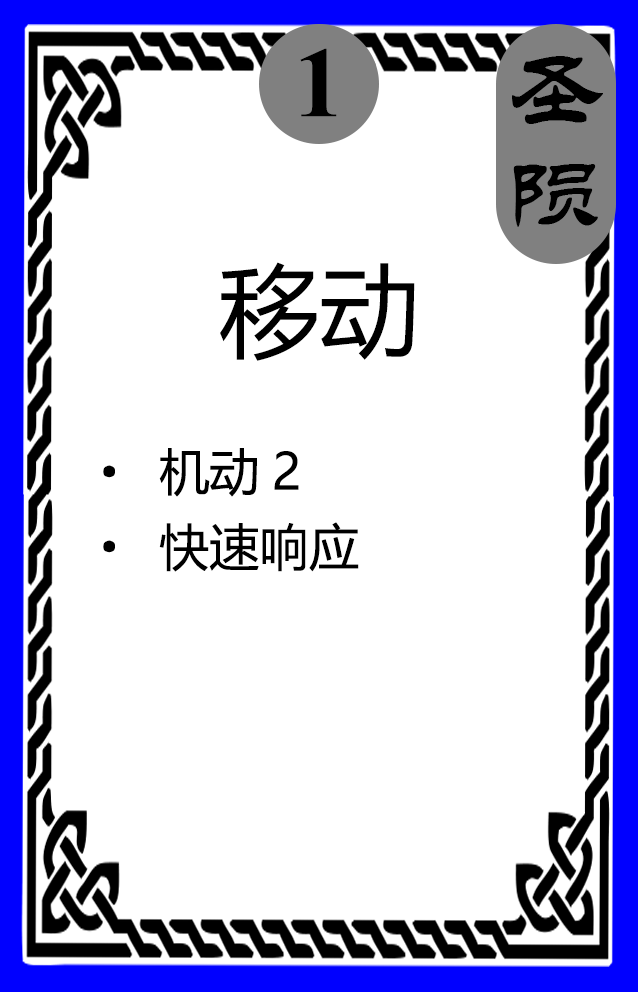
<style>
.page{position:relative;width:638px;height:992px;background:#ffffff}
.page>*{position:absolute;margin:0}
.t1{font:100px "TimesNewRomanPS-BoldMT";color:#000000}
.t2{font:100px/200px "STLiti";color:#000000}
.t3{font:100px "MicrosoftYaHei";color:#000000}
.t4{font:50px/75px "MicrosoftYaHei";color:#000000}
.t5{font:50px/75px "SimSun";color:#000000}
</style>
<div class="page">
<p class="t1" style="left:300px;top:48px;width:37px;height:69px">1</p>
<p class="t2" style="left:512px;top:56px;width:91px;height:171px;text-align:center">圣陨</p>
<p class="t3" style="left:220px;top:262px;width:195px;height:99px">移动</p>
<p class="t4" style="left:103px;top:448px;width:256px;height:124px"><span class="t5">· </span>机动2<br><span class="t5">· </span>快速响应</p>
</div>
